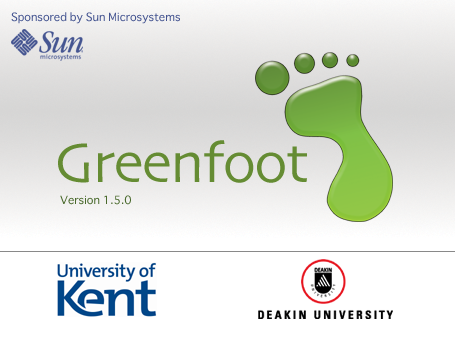
<style>
.page{position:relative;width:455px;height:347px;background:#ffffff}
.page>*{position:absolute;margin:0}
.t1{font:11px "Osaka";color:#455591}
.t2{font:58.3px "Skia-Regular";letter-spacing:-0.025em;color:#658c33}
.t3{font:11px "Osaka";color:#49692c}
</style>
<div class="page">
<p class="t1" style="left:11px;top:12px;width:169px;height:12px">Sponsored by Sun Microsystems</p>
<p class="t2" style="left:58px;top:140px;width:249px;height:43px">Greenfoot</p>
<p class="t3" style="left:60px;top:195px;width:71px;height:10px">Version 1.5.0</p>
</div>
